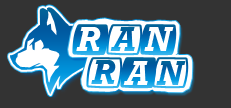
<style>
.page{position:relative;width:231px;height:108px;background:#333333}
.page>*{position:absolute;margin:0}
.t1{font:34px "Rockwell-BoldItalic";color:#ffffff}
.t2{font:34px "Rockwell-BoldItalic"}
</style>
<div class="page">
<p class="t1" style="left:76px;top:27px;width:25px;height:24px">R</p>
<p class="t2" style="left:110px;top:27px;width:25px;height:24px">A</p>
<p class="t1" style="left:144px;top:27px;width:30px;height:24px">N</p>
<p class="t2" style="left:91px;top:60px;width:25px;height:24px">R</p>
<p class="t1" style="left:123px;top:61px;width:25px;height:24px">A</p>
<p class="t2" style="left:156px;top:61px;width:30px;height:24px">N</p>
</div>
